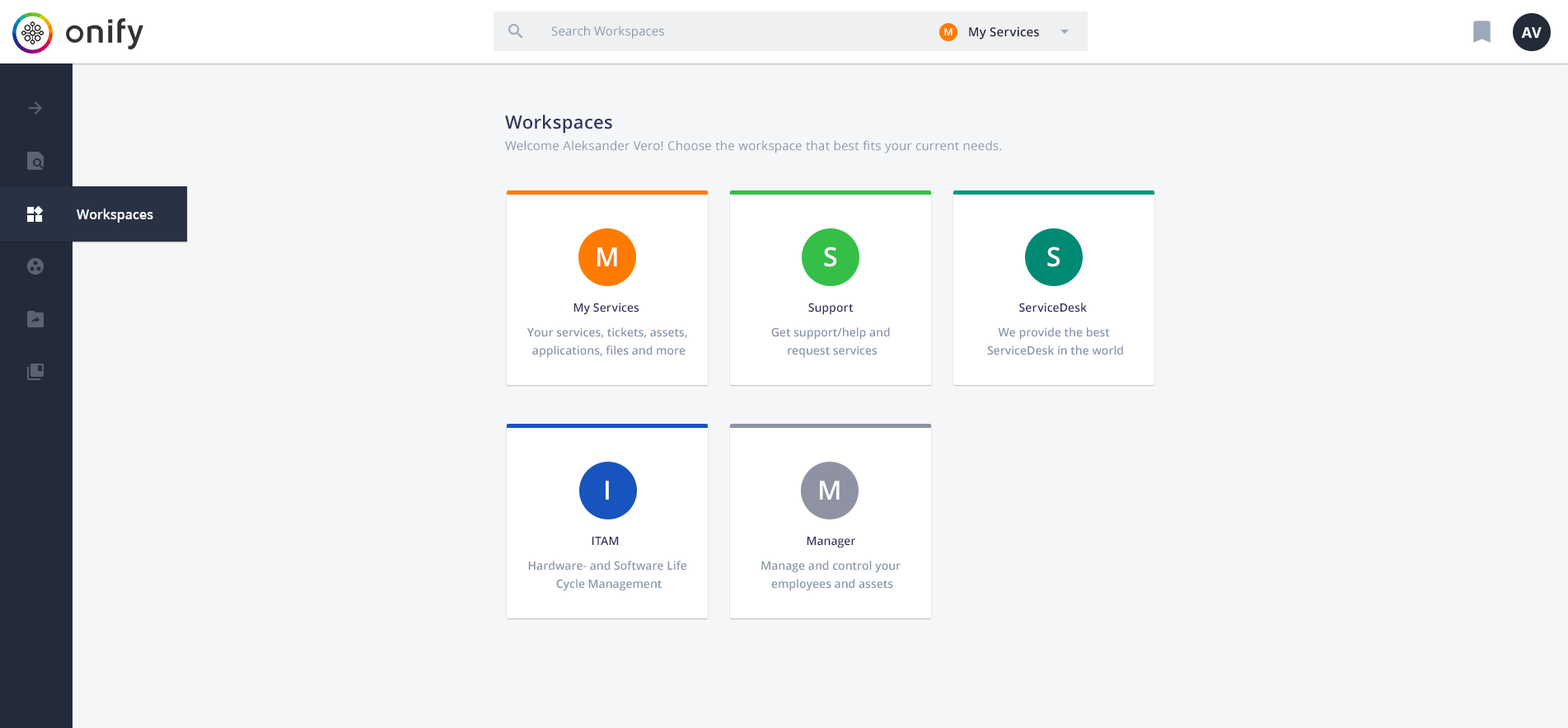
<style>
.page{position:relative;width:1568px;height:728px;background:#f5f6f8}
.page>*{position:absolute;margin:0}
.t1{font:12.4px "OpenSans";letter-spacing:0.01em;color:#8898aa}
.t2{font:9.9px "OpenSans-Semibold";letter-spacing:0.01em;color:#ffffff}
.t3{font:12.4px "OpenSans-Semibold";letter-spacing:0.01em;color:#23233d}
.t4{font:14.8px "OpenSans-Bold";color:#ffffff;text-transform:uppercase}
.t5{font:18.1px "OpenSans-Semibold";letter-spacing:0.02em;color:#32325d}
.t6{font:12.4px "OpenSans";letter-spacing:0.02em;color:#8898aa}
.t7{font:13.2px "OpenSans-Semibold";color:#fefefe}
.t8{font:26.4px "OpenSans-Semibold";letter-spacing:0.005em;color:#ffffff}
.t9{font:11.5px "OpenSans-Semibold";letter-spacing:0.005em;color:#32325d}
.t10{font:11.5px/18.1px "OpenSans-Semibold";color:#8898aa}
</style>
<div class="page">
<p class="t1" style="left:551px;top:26px;width:113px;height:13px">Search Workspaces</p>
<p class="t2" style="left:944px;top:28px;width:9px;height:7px">M</p>
<p class="t3" style="left:969px;top:26px;width:70px;height:14px">My Services</p>
<p class="t4" style="left:1521px;top:27px;width:21px;height:11px">AV</p>
<p class="t5" style="left:505px;top:115px;width:107px;height:18px">Workspaces</p>
<p class="t6" style="left:505px;top:140px;width:497px;height:13px">Welcome Aleksander Vero! Choose the workspace that best fits your current needs.</p>
<p class="t7" style="left:77px;top:208px;width:76px;height:14px">Workspaces</p>
<p class="t8" style="left:597px;top:247px;width:20px;height:19px">M</p>
<p class="t8" style="left:824px;top:246px;width:12px;height:21px">S</p>
<p class="t8" style="left:1047px;top:246px;width:13px;height:21px">S</p>
<p class="t9" style="left:573px;top:302px;width:66px;height:13px">My Services</p>
<p class="t9" style="left:808px;top:302px;width:46px;height:13px">Support</p>
<p class="t9" style="left:1019px;top:302px;width:68px;height:10px">ServiceDesk</p>
<p class="t10" style="left:527px;top:327px;width:160px;height:31px;text-align:center">Your services, tickets, assets, <br>applications, files and more</p>
<p class="t10" style="left:771px;top:327px;width:119px;height:31px;text-align:center">Get support/help and <br>request services</p>
<p class="t10" style="left:987px;top:327px;width:136px;height:28px;text-align:center">We provide the best <br>ServiceDesk in the world</p>
<p class="t8" style="left:606px;top:480px;width:3px;height:19px">I</p>
<p class="t8" style="left:820px;top:480px;width:20px;height:19px">M</p>
<p class="t9" style="left:592px;top:536px;width:27px;height:9px">ITAM</p>
<p class="t9" style="left:807px;top:536px;width:48px;height:12px">Manager</p>
<p class="t10" style="left:528px;top:560px;width:158px;height:31px;text-align:center">Hardware- and Software Life <br>Cycle Management</p>
<p class="t10" style="left:761px;top:560px;width:140px;height:31px;text-align:center">Manage and control your <br>employees and assets</p>
</div>
